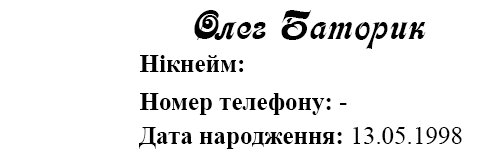
<style>
.page{position:relative;width:480px;height:160px;background:#ffffff}
.page>*{position:absolute;margin:0}
.t1{font:41.7px "Asessor";color:#000000}
.t2{font:25px "TimesNewRomanPS-BoldMT";color:#000000}
.t3{font:25px "TimesNewRomanPSMT";color:#000000}
</style>
<div class="page">
<p class="t1" style="left:194px;top:10px;width:232px;height:39px">Олег Баторик</p>
<p class="t2" style="left:140px;top:55px;width:104px;height:17px">Нікнейм:</p>
<p class="t2" style="left:140px;top:93px;width:207px;height:22px">Номер телефону: <span class="t3">-</span></p>
<p class="t2" style="left:139px;top:127px;width:323px;height:22px">Дата народження: <span class="t3">13.05.1998</span></p>
</div>
